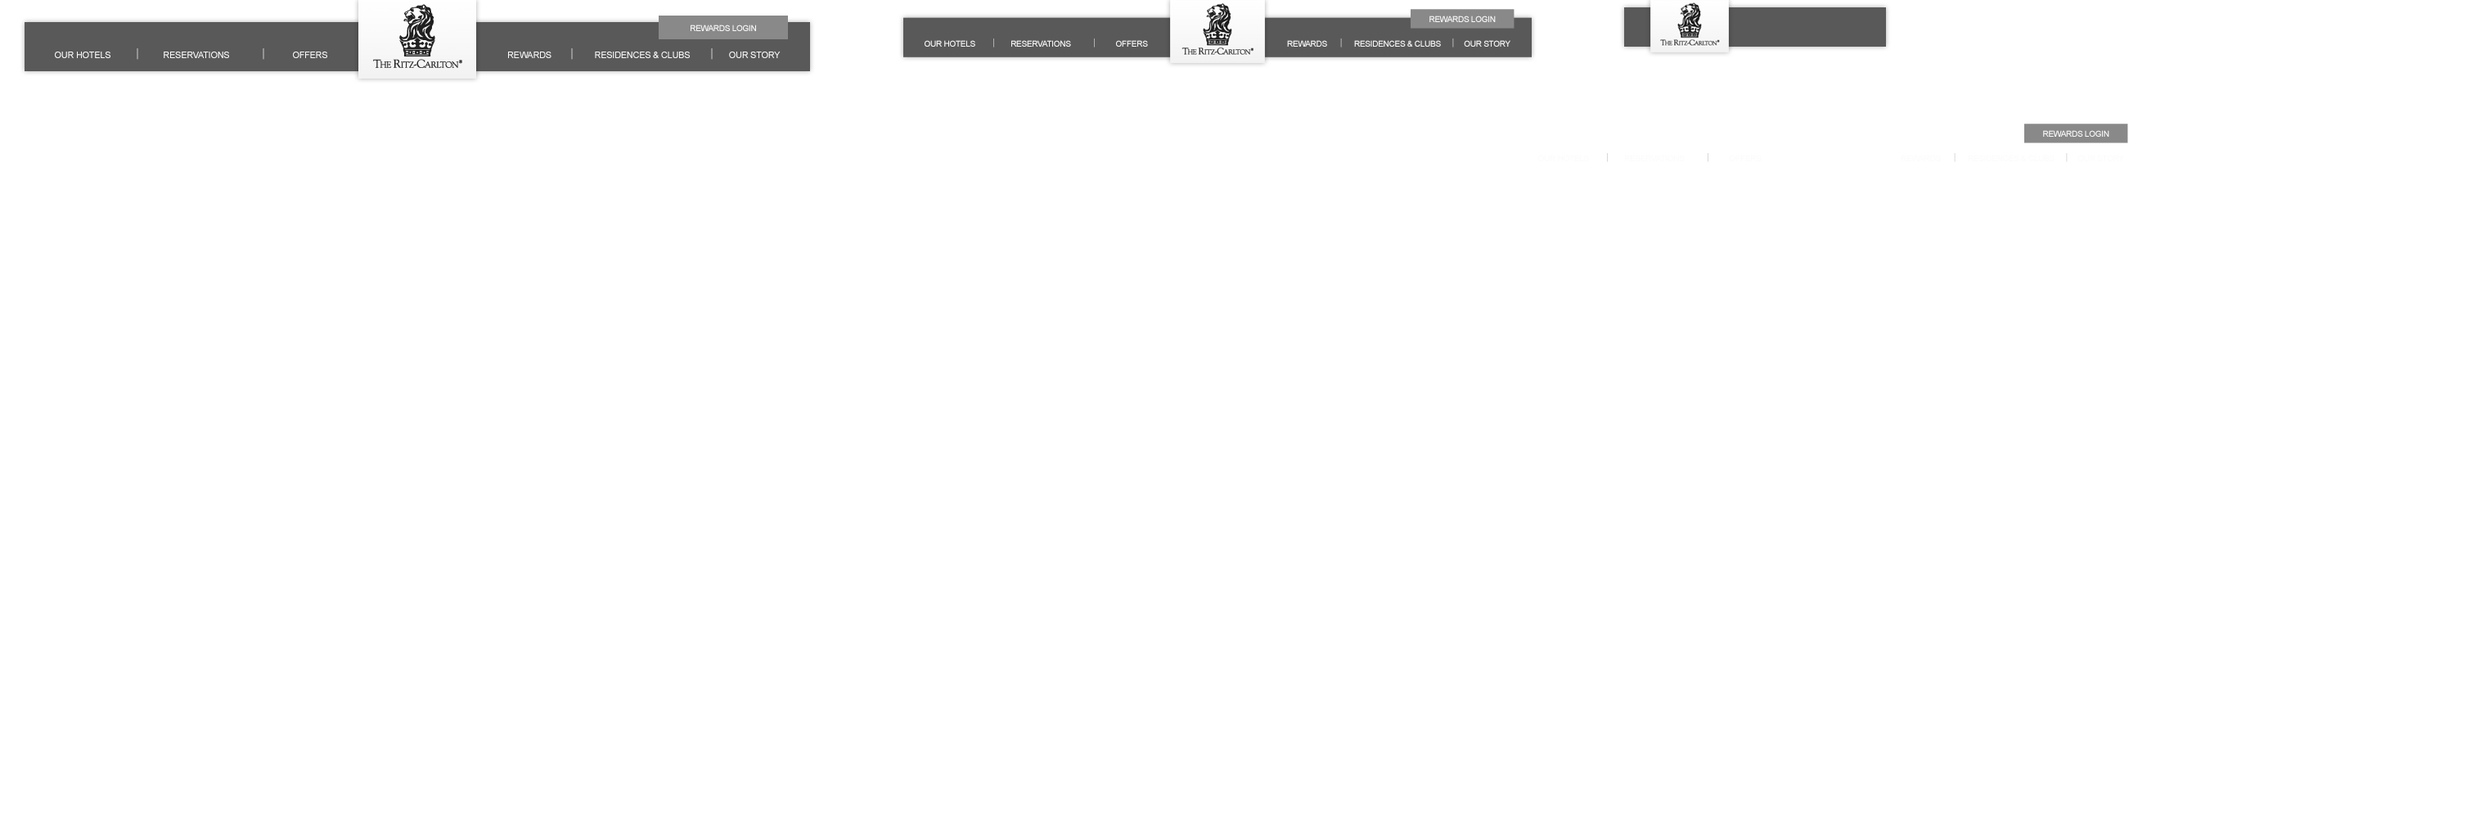
<style>
.page{position:relative;width:2471px;height:835px;background:#ffffff}
.page>*{position:absolute;margin:0}
.t1{font:8.2px "ArialMT";letter-spacing:-0.025em;color:#fcfbfb}
.t2{font:9.2px "ArialMT";letter-spacing:-0.025em}
.t3{font:9px "ArialMT";letter-spacing:-0.025em;color:#fcfbfb}
.t4{font:11.5px "ArialMT";letter-spacing:-0.025em}
.t5{font:9.2px "ArialMT";letter-spacing:-0.025em;color:#c9c9c9}
</style>
<div class="page">
<p class="t1" style="left:1429px;top:16px;width:67px;height:6px">REWARDS LOGIN</p>
<p class="t1" style="left:691px;top:25px;width:65px;height:6px">REWARDS LOGIN</p>
<p class="t1" style="left:925px;top:40px;width:50px;height:7px">OUR HOTELS</p>
<p class="t2" style="left:993px;top:38px;width:1px;height:9px">|</p>
<p class="t1" style="left:1011px;top:40px;width:60px;height:7px">RESERVATIONS</p>
<p class="t2" style="left:1094px;top:38px;width:1px;height:9px">|</p>
<p class="t1" style="left:1116px;top:40px;width:32px;height:7px">OFFERS</p>
<p class="t1" style="left:1287px;top:40px;width:40px;height:7px">REWARDS</p>
<p class="t2" style="left:1340px;top:38px;width:2px;height:9px">|</p>
<p class="t1" style="left:1354px;top:40px;width:87px;height:7px">RESIDENCES &amp; CLUBS</p>
<p class="t2" style="left:1452px;top:38px;width:2px;height:9px">|</p>
<p class="t1" style="left:1464px;top:40px;width:46px;height:7px">OUR STORY</p>
<p class="t3" style="left:55px;top:52px;width:55px;height:6px">OUR HOTELS</p>
<p class="t4" style="left:137px;top:48px;width:1px;height:12px">|</p>
<p class="t3" style="left:164px;top:52px;width:65px;height:6px">RESERVATIONS</p>
<p class="t4" style="left:263px;top:48px;width:1px;height:12px">|</p>
<p class="t3" style="left:293px;top:52px;width:34px;height:6px">OFFERS</p>
<p class="t3" style="left:508px;top:52px;width:43px;height:6px">REWARDS</p>
<p class="t4" style="left:571px;top:48px;width:2px;height:12px">|</p>
<p class="t3" style="left:595px;top:52px;width:95px;height:6px">RESIDENCES &amp; CLUBS</p>
<p class="t4" style="left:711px;top:48px;width:2px;height:12px">|</p>
<p class="t3" style="left:729px;top:52px;width:52px;height:6px">OUR STORY</p>
<p class="t1" style="left:2043px;top:130px;width:66px;height:7px">REWARDS LOGIN</p>
<p class="t5" style="left:1607px;top:153px;width:1px;height:9px">|</p>
<p class="t5" style="left:1708px;top:153px;width:0px;height:9px">|</p>
<p class="t2" style="left:1954px;top:153px;width:1px;height:9px">|</p>
<p class="t2" style="left:2066px;top:153px;width:2px;height:9px">|</p>
</div>
